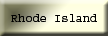
<style>
.page{position:relative;width:108px;height:36px}
.page>*{position:absolute;margin:0}
.t1{font:12px "Courier";color:#000000}
</style>
<div class="page">
<p class="t1" style="left:11px;top:14px;width:86px;height:8px">Rhode Island</p>
</div>
